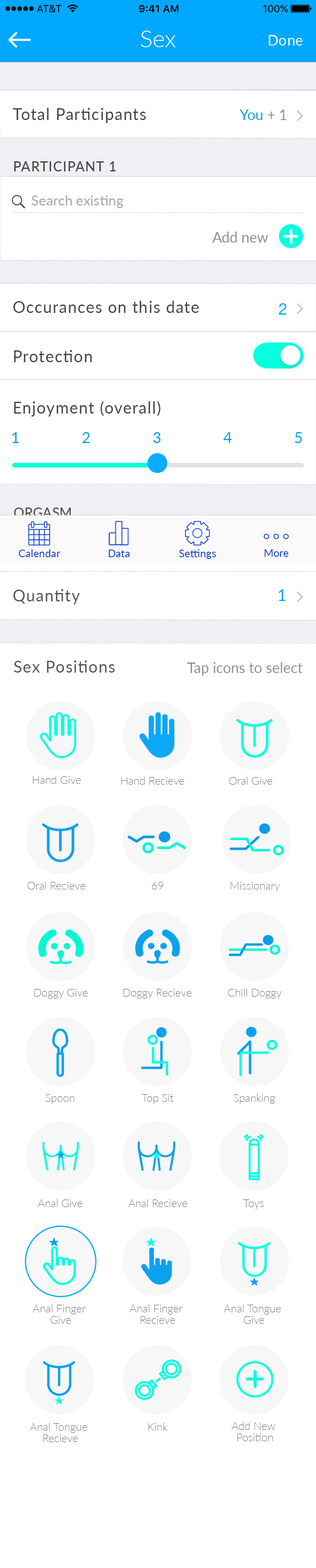
<style>
.page{position:relative;width:316px;height:1568px;background:#ffffff}
.page>*{position:absolute;margin:0}
.t1{font:23.7px "Lato-Light";color:#ffffff}
.t2{font:14.3px "Lato-Regular";letter-spacing:0.025em;color:#ffffff}
.t3{font:16px "Lato-Regular";letter-spacing:0.05em;color:#464646}
.t4{font:14.3px "Lato-Regular";color:#00a1ec}
.t5{font:14.3px "Lato-Regular";color:#8e8e93}
.t6{font:13.5px "Lato-Medium";letter-spacing:0.05em;color:#464646}
.t7{font:13.9px "Lato-Medium";color:#adadad}
.t8{font:16px "HelveticaNeue";color:#00a8ff}
.t9{font:15.7px "Lato-Regular";letter-spacing:0.05em;color:#00a1ec;text-transform:uppercase}
.t10{font:13.5px "Lato-Medium";letter-spacing:0.01em;color:#464646;text-transform:uppercase}
.t11{font:10.5px "Lato-Regular";letter-spacing:0.01em;color:#083ed9}
.t12{font:16px "Lato-Regular";letter-spacing:0.05em;color:#555555}
.t13{font:16px "Lato-Regular";color:#00a8ff}
.t14{font:11px "Lato-Thin";color:#555555}
.t15{font:11px/11.4px "Lato-Thin";color:#555555}
</style>
<div class="page">
<p class="t1" style="left:141px;top:31px;width:35px;height:16px">Sex</p>
<p class="t2" style="left:269px;top:35px;width:33px;height:10px">Done</p>
<p class="t3" style="left:13px;top:108px;width:133px;height:15px">Total Participants</p>
<p class="t4" style="left:240px;top:110px;width:46px;height:10px">You <span class="t5">+ 1</span></p>
<p class="t6" style="left:14px;top:161px;width:102px;height:10px">PARTICIPANT 1</p>
<p class="t7" style="left:32px;top:195px;width:91px;height:13px">Search existing</p>
<p class="t5" style="left:212px;top:232px;width:56px;height:11px">Add new</p>
<p class="t3" style="left:13px;top:301px;width:186px;height:12px">Occurances on this date</p>
<p class="t8" style="left:278px;top:303px;width:8px;height:12px">2</p>
<p class="t3" style="left:14px;top:350px;width:78px;height:12px">Protection</p>
<p class="t3" style="left:14px;top:401px;width:146px;height:16px">Enjoyment (overall)</p>
<p class="t9" style="left:12px;top:432px;width:290px;height:11px">1             2             3             4             5</p>
<p class="t10" style="left:14px;top:508px;width:57px;height:10px">orgasm</p>
<p class="t11" style="left:19px;top:549px;width:41px;height:8px">Calendar</p>
<p class="t11" style="left:109px;top:550px;width:21px;height:7px">Data</p>
<p class="t11" style="left:179px;top:549px;width:37px;height:10px">Settings</p>
<p class="t11" style="left:264px;top:549px;width:24px;height:8px">More</p>
<p class="t12" style="left:13px;top:589px;width:67px;height:15px">Quantity</p>
<p class="t13" style="left:278px;top:589px;width:8px;height:12px">1</p>
<p class="t12" style="left:14px;top:660px;width:101px;height:13px">Sex Positions</p>
<p class="t5" style="left:187px;top:662px;width:115px;height:14px">Tap icons to select</p>
<p class="t14" style="left:33px;top:776px;width:48px;height:8px">Hand Give</p>
<p class="t14" style="left:121px;top:777px;width:63px;height:8px">Hand Recieve</p>
<p class="t14" style="left:229px;top:777px;width:43px;height:8px">Oral Give</p>
<p class="t14" style="left:27px;top:881px;width:58px;height:9px">Oral Recieve</p>
<p class="t14" style="left:152px;top:882px;width:11px;height:8px">69</p>
<p class="t14" style="left:230px;top:882px;width:50px;height:10px">Missionary</p>
<p class="t14" style="left:34px;top:989px;width:54px;height:10px">Doggy Give</p>
<p class="t14" style="left:123px;top:989px;width:69px;height:10px">Doggy Recieve</p>
<p class="t14" style="left:228px;top:988px;width:54px;height:11px">Chill Doggy</p>
<p class="t14" style="left:45px;top:1094px;width:30px;height:10px">Spoon</p>
<p class="t14" style="left:142px;top:1094px;width:32px;height:10px">Top Sit</p>
<p class="t14" style="left:234px;top:1094px;width:41px;height:10px">Spanking</p>
<p class="t14" style="left:37px;top:1199px;width:46px;height:8px">Anal Give</p>
<p class="t14" style="left:128px;top:1199px;width:59px;height:8px">Anal Recieve</p>
<p class="t14" style="left:243px;top:1199px;width:21px;height:10px">Toys</p>
<p class="t15" style="left:32px;top:1304px;width:54px;height:20px;text-align:center">Anal Finger <br>Give</p>
<p class="t15" style="left:129px;top:1304px;width:54px;height:20px;text-align:center">Anal Finger <br>Recieve</p>
<p class="t15" style="left:224px;top:1304px;width:57px;height:20px;text-align:center">Anal Tongue <br>Give</p>
<p class="t15" style="left:231px;top:1422px;width:44px;height:19px;text-align:center">Add New <br>Position</p>
<p class="t15" style="left:30px;top:1423px;width:57px;height:19px;text-align:center">Anal Tongue <br>Recieve</p>
<p class="t14" style="left:148px;top:1423px;width:20px;height:8px">Kink</p>
</div>
